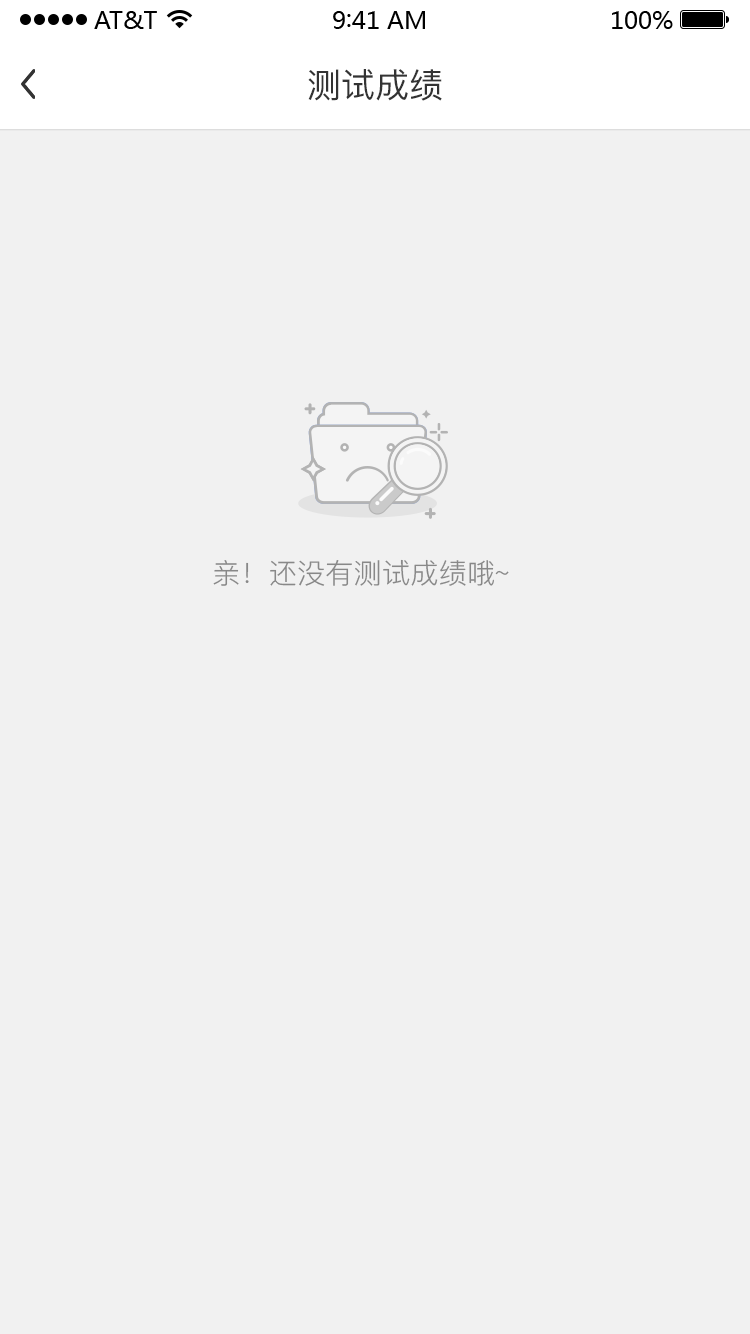
<style>
.page{position:relative;width:750px;height:1334px;background:#f1f1f1}
.page>*{position:absolute;margin:0}
.t1{font:34px "PingFang-SC-Medium";color:#333333}
.t2{font:28px "PingFang-SC-Regular";color:#888888}
</style>
<div class="page">
<p class="t1" style="left:308px;top:69px;width:134px;height:32px">测试成绩</p>
<p class="t2" style="left:213px;top:559px;width:296px;height:27px">亲！还没有测试成绩哦~</p>
</div>
